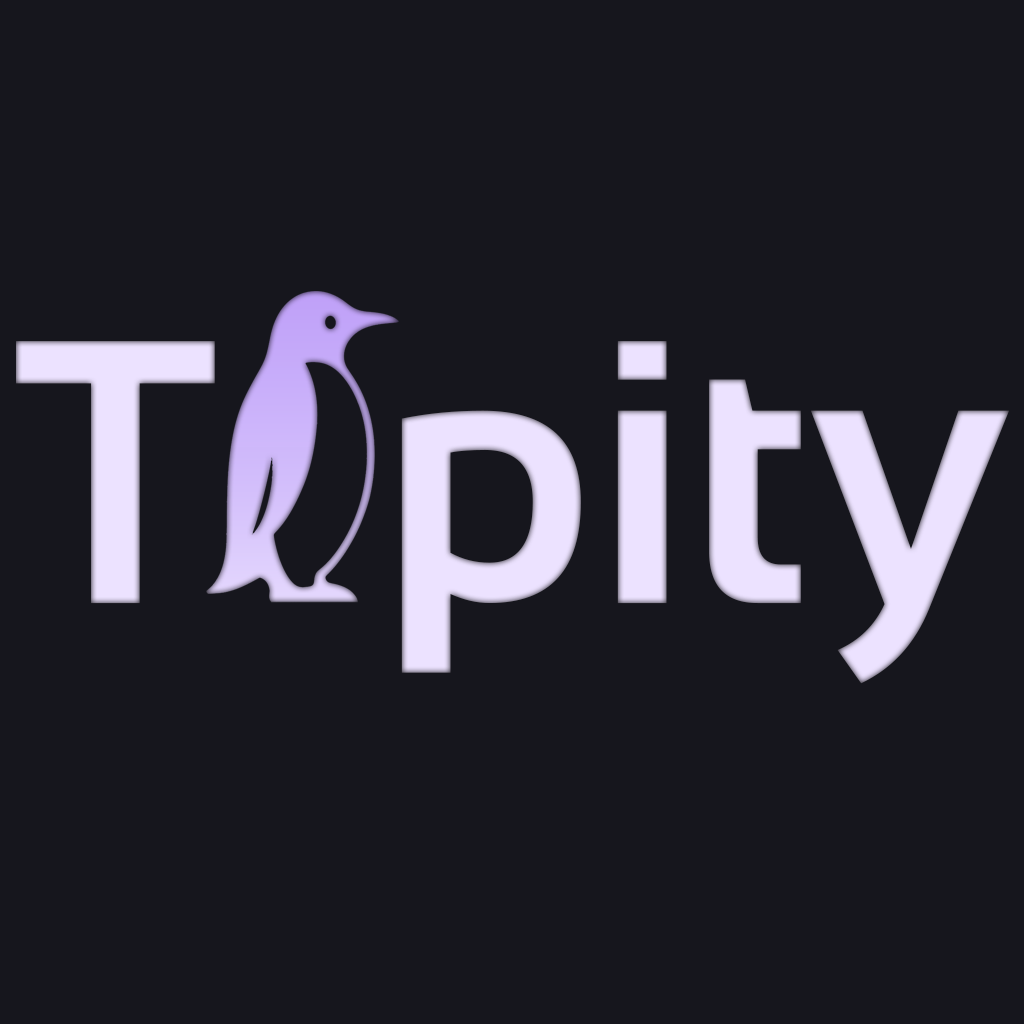
<style>
.page{position:relative;width:1024px;height:1024px;background:#16161d}
.page>*{position:absolute;margin:0}
.t1{font:375px "Sansation-Bold";color:#ece2ff}
</style>
<div class="page">
<p class="t1" style="left:16px;top:341px;width:993px;height:343px">T  pity</p>
</div>
